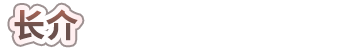
<style>
.page{position:relative;width:360px;height:50px;background:#ffffff}
.page>*{position:absolute;margin:0}
.t1{font:32px "SourceHanSansSC-Bold";color:#73534d;font-weight:bold}
</style>
<div class="page">
<p class="t1" style="left:14px;top:9px;width:64px;height:32px">长介</p>
</div>
